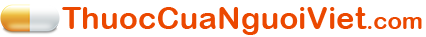
<style>
.page{position:relative;width:426px;height:37px;background:#ffffff}
.page>*{position:absolute;margin:0}
.t1{font:31.3px "ArialRoundedMTBold";color:#eb4800}
.t2{font:23.7px "ArialRoundedMTBold";color:#eb4800}
</style>
<div class="page">
<p class="t1" style="left:62px;top:7px;width:360px;height:28px">ThuocCuaNguoiViet<span class="t2">.com</span></p>
</div>
